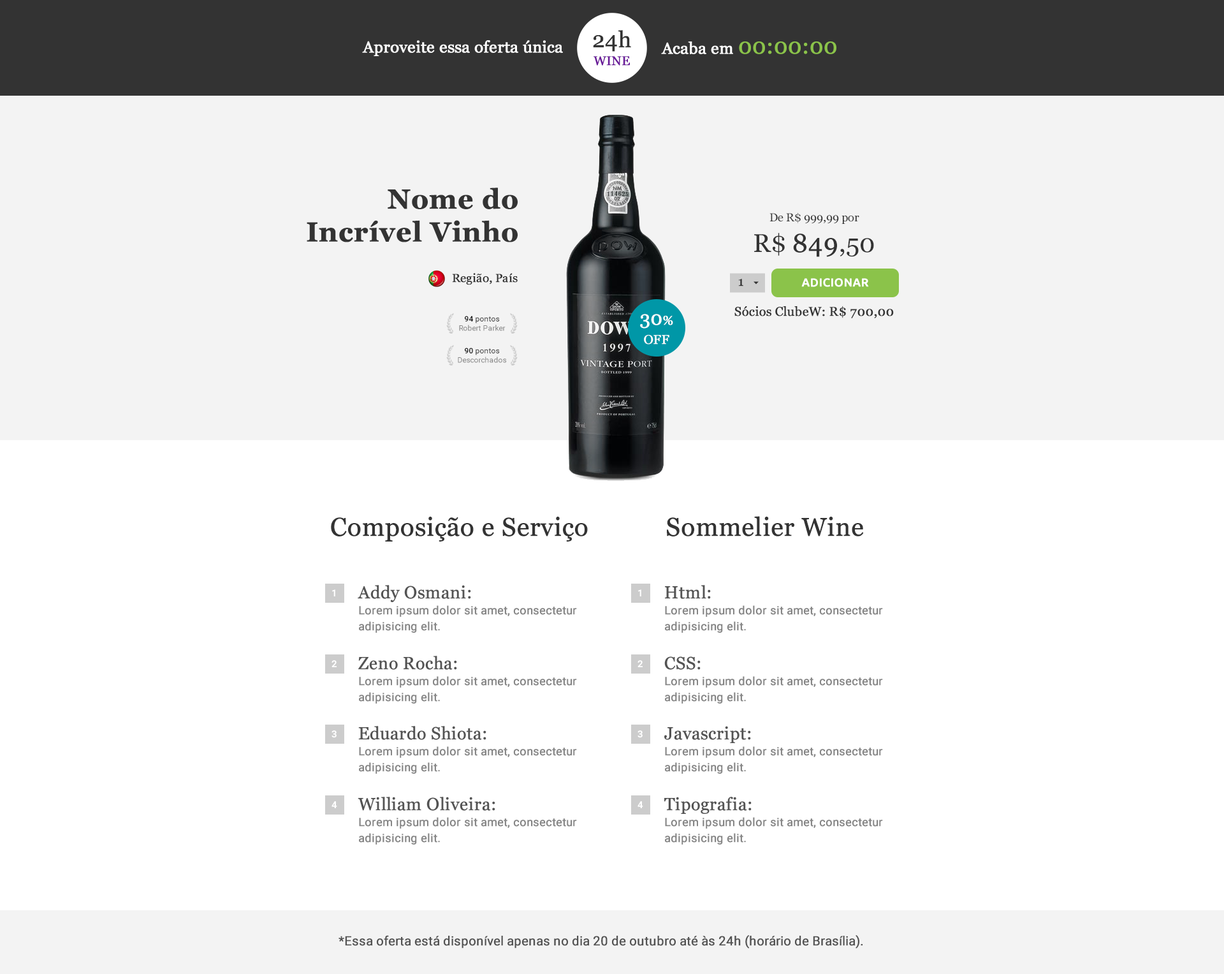
<style>
.page{position:relative;width:1224px;height:974px;background:#ffffff}
.page>*{position:absolute;margin:0}
.t1{font:12.7px/17.8px "Georgia";color:#6a1a99;font-weight:bold}
.t2{font:22.2px/31.1px "Georgia";color:#333333;font-weight:bold}
.t3{font:15.9px "Georgia";color:#ffffff;font-weight:bold}
.t4{font:22.3px "Georgia";color:#8bc34a;font-weight:bold}
.t5{font:27.4px/32.9px "Georgia-Bold";color:#333333;font-weight:bold}
.t6{font:11.5px/13.8px "Georgia";color:#333333}
.t7{font:25.5px/30.6px "Georgia";color:#333333}
.t8{font:25.5px/30.6px "Georgia";color:#333333;font-weight:bold}
.t9{font:11.5px "Georgia";color:#333333;font-weight:bold}
.t10{font:12.8px "Georgia";color:#333333;font-weight:bold}
.t11{font:11.5px "Ubuntu-Medium";color:#ffffff;font-weight:bold}
.t12{font:7.7px/9.2px "Roboto-Regular";color:#868686}
.t13{font:7.7px/9.2px "Roboto-Medium";color:#111111}
.t14{font:7.7px/9.2px "Roboto-Regular";color:#333333}
.t15{font:12.8px/19.1px "Georgia";color:#ffffff;font-weight:bold}
.t16{font:19.1px/28.7px "Georgia";color:#ffffff;font-weight:bold}
.t17{font:25.5px "Georgia";color:#333333;font-weight:bold}
.t18{font:9.6px "Roboto-Bold";color:#ffffff}
.t19{font:11.5px/16.1px "Roboto-Regular";color:#868686;font-weight:bold}
.t20{font:17.2px/27.6px "Georgia";color:#535353;font-weight:bold}
.t21{font:12.8px "Roboto-Regular";color:#525252;font-weight:bold}
</style>
<div class="page">
<p class="t1" style="left:593px;top:30px;width:38px;height:36px;text-align:center"><span class="t2">24h<br></span>WINE</p>
<p class="t3" style="left:362px;top:40px;width:201px;height:16px">Aproveite essa oferta única</p>
<p class="t3" style="left:661px;top:41px;width:176px;height:13px">Acaba em <span class="t4">00:00:00</span></p>
<p class="t5" style="left:307px;top:187px;width:211px;height:55px;text-align:right">Nome do<br>Incrível Vinho</p>
<p class="t6" style="left:754px;top:212px;width:120px;height:45px;text-align:center">De R$ 999,99 por<br><span class="t7">R$ </span><span class="t8">849</span><span class="t7">,50</span></p>
<p class="t9" style="left:452px;top:273px;width:66px;height:12px">Região, País</p>
<p class="t10" style="left:739px;top:279px;width:5px;height:7px">1</p>
<p class="t11" style="left:802px;top:278px;width:67px;height:9px">ADICIONAR</p>
<p class="t12" style="left:459px;top:316px;width:47px;height:15px;text-align:center"><span class="t13">94 </span><span class="t14">pontos<br></span>Robert Parker</p>
<p class="t15" style="left:640px;top:314px;width:33px;height:30px;text-align:center"><span class="t16">30</span>%<br>OFF</p>
<p class="t10" style="left:735px;top:306px;width:159px;height:12px">Sócios ClubeW: R$ 700,00</p>
<p class="t12" style="left:458px;top:348px;width:49px;height:15px;text-align:center"><span class="t13">90 </span><span class="t14">pontos<br></span>Descorchados</p>
<p class="t17" style="left:331px;top:517px;width:257px;height:24px">Composição e Serviço</p>
<p class="t17" style="left:667px;top:516px;width:197px;height:20px">Sommelier Wine</p>
<p class="t18" style="left:332px;top:589px;width:3px;height:7px">1</p>
<p class="t19" style="left:358px;top:585px;width:219px;height:48px"><span class="t20">Addy Osmani:<br></span>Lorem ipsum dolor sit amet, consectetur adipisicing elit.</p>
<p class="t18" style="left:638px;top:589px;width:4px;height:7px">1</p>
<p class="t19" style="left:665px;top:585px;width:218px;height:48px"><span class="t20">Html:<br></span>Lorem ipsum dolor sit amet, consectetur adipisicing elit.</p>
<p class="t18" style="left:332px;top:660px;width:5px;height:7px">2</p>
<p class="t19" style="left:358px;top:656px;width:219px;height:47px"><span class="t20">Zeno Rocha:<br></span>Lorem ipsum dolor sit amet, consectetur adipisicing elit.</p>
<p class="t18" style="left:638px;top:660px;width:5px;height:7px">2</p>
<p class="t19" style="left:665px;top:656px;width:218px;height:47px"><span class="t20">CSS:<br></span>Lorem ipsum dolor sit amet, consectetur adipisicing elit.</p>
<p class="t19" style="left:358px;top:726px;width:219px;height:48px"><span class="t20">Eduardo Shiota:<br></span>Lorem ipsum dolor sit amet, consectetur adipisicing elit.</p>
<p class="t19" style="left:665px;top:726px;width:218px;height:48px"><span class="t20">Javascript:<br></span>Lorem ipsum dolor sit amet, consectetur adipisicing elit.</p>
<p class="t18" style="left:332px;top:730px;width:5px;height:8px">3</p>
<p class="t18" style="left:638px;top:730px;width:5px;height:8px">3</p>
<p class="t19" style="left:358px;top:797px;width:219px;height:47px"><span class="t20">William Oliveira:<br></span>Lorem ipsum dolor sit amet, consectetur adipisicing elit.</p>
<p class="t19" style="left:665px;top:797px;width:218px;height:47px"><span class="t20">Tipografia:<br></span>Lorem ipsum dolor sit amet, consectetur adipisicing elit.</p>
<p class="t18" style="left:332px;top:801px;width:5px;height:7px">4</p>
<p class="t18" style="left:638px;top:801px;width:5px;height:7px">4</p>
<p class="t21" style="left:339px;top:935px;width:525px;height:13px">*Essa oferta está disponível apenas no dia 20 de outubro até às 24h (horário de Brasília).</p>
</div>
